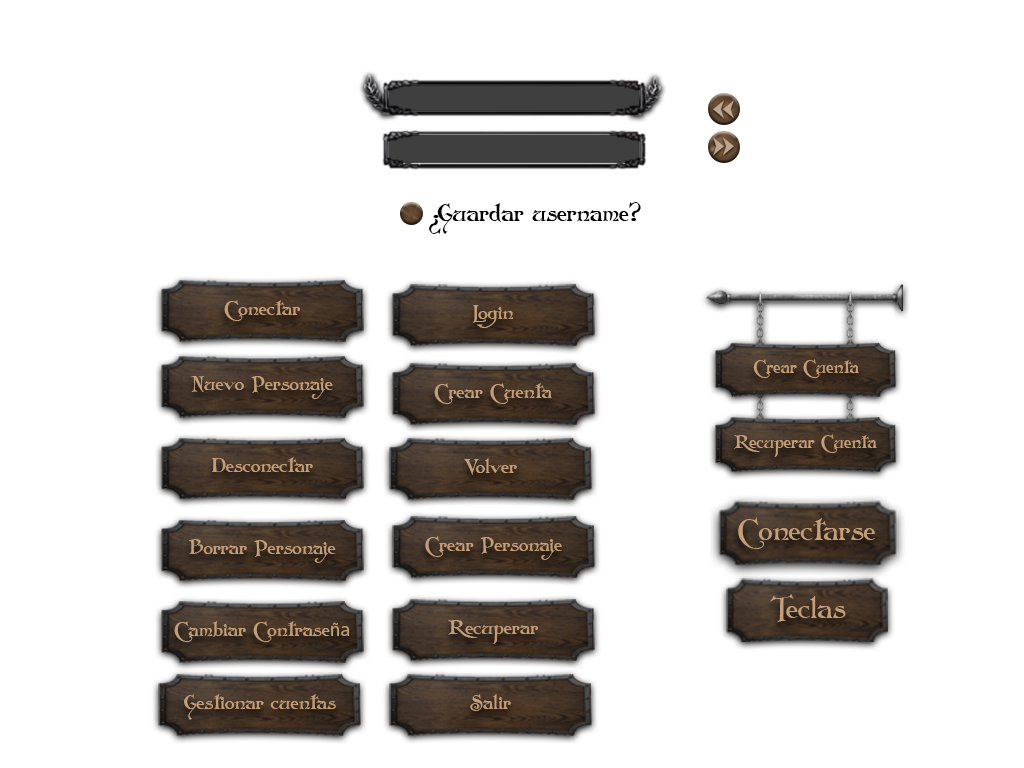
<style>
.page{position:relative;width:1024px;height:768px;background:#ffffff}
.page>*{position:absolute;margin:0}
.t1{font:23.9px "Folkard";color:#000000}
.t2{font:19.7px "Folkard";color:#c49e78}
.t3{font:17.6px "Folkard";color:#c49e78}
.t4{font:29.2px "Folkard";color:#c49e78}
.t5{font:19.7px "MyriadPro-Regular";color:#c49e78}
</style>
<div class="page">
<p class="t1" style="left:437px;top:202px;width:204px;height:32px">Guardar username?</p>
<p class="t1" style="left:429px;top:215px;width:12px;height:19px;rotate:180deg">?</p>
<p class="t2" style="left:224px;top:300px;width:76px;height:21px">Conectar</p>
<p class="t2" style="left:472px;top:305px;width:42px;height:23px">Login</p>
<p class="t3" style="left:753px;top:359px;width:106px;height:19px">Crear Cuenta</p>
<p class="t2" style="left:191px;top:376px;width:142px;height:23px">Nuevo Personaje</p>
<p class="t2" style="left:434px;top:383px;width:118px;height:21px">Crear Cuenta</p>
<p class="t3" style="left:734px;top:434px;width:143px;height:23px">Recuperar Cuenta</p>
<p class="t2" style="left:211px;top:457px;width:102px;height:15px">Desconectar</p>
<p class="t2" style="left:464px;top:458px;width:53px;height:17px">Volver</p>
<p class="t4" style="left:738px;top:517px;width:137px;height:32px">Conectarse</p>
<p class="t2" style="left:189px;top:539px;width:147px;height:24px">Borrar Personaje</p>
<p class="t2" style="left:425px;top:536px;width:137px;height:24px">Crear Personaje</p>
<p class="t4" style="left:770px;top:594px;width:76px;height:28px">Teclas</p>
<p class="t2" style="left:174px;top:621px;width:175px;height:21px">Cambiar Contrase<span class="t5">ña</span></p>
<p class="t2" style="left:448px;top:620px;width:90px;height:24px">Recuperar</p>
<p class="t2" style="left:184px;top:694px;width:152px;height:26px">Gestionar cuentas</p>
<p class="t2" style="left:470px;top:694px;width:41px;height:17px">Salir</p>
</div>
